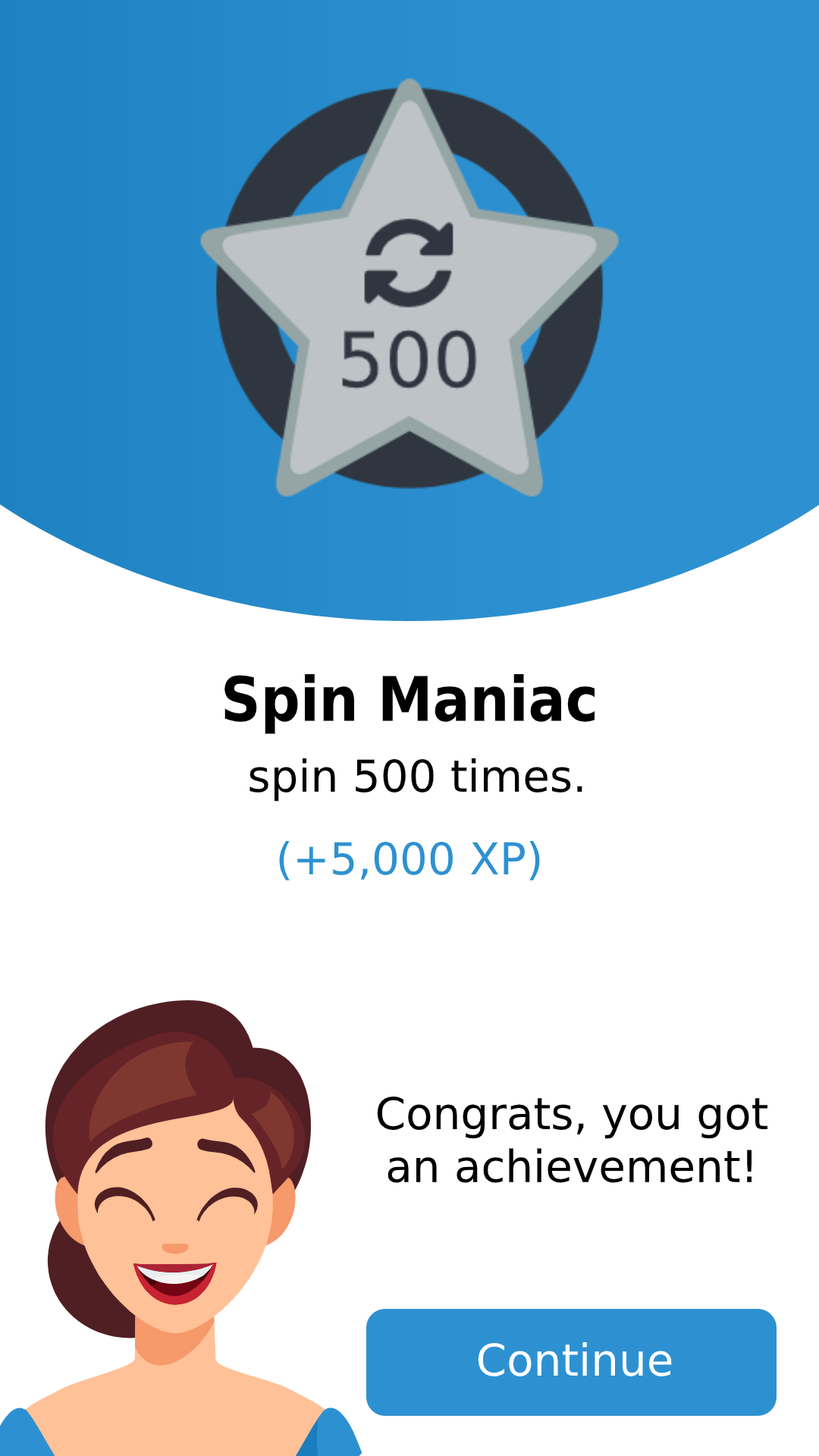
<style>
.page{position:relative;width:819px;height:1456px;background:#ffffff}
.page>*{position:absolute;margin:0}
.t1{font:61.4px "DejaVuSansCondensed-Bold";color:#000000}
.t2{font:44px "DejaVuSans";color:#000000}
.t3{font:44px "DejaVuSans";color:#2d91d1}
.t4{font:44px "DejaVuSans";color:#ffffff}
</style>
<div class="page">
<p class="t1" style="left:224px;top:674px;width:371px;height:60px">Spin Maniac</p>
<p class="t2" style="left:249px;top:758px;width:333px;height:44px">spin 500 times.</p>
<p class="t3" style="left:279px;top:841px;width:261px;height:39px">(+5,000 XP)</p>
<p class="t2" style="left:377px;top:1097px;width:391px;height:86px;text-align:center">Congrats, you got an achievement!</p>
<p class="t4" style="left:478px;top:1342px;width:194px;height:34px">Continue</p>
</div>
